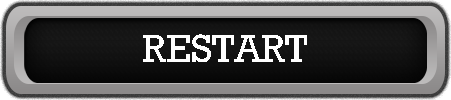
<style>
.page{position:relative;width:451px;height:100px}
.page>*{position:absolute;margin:0}
.t1{font:39.8px "Rockwell";color:#ffffff}
</style>
<div class="page">
<p class="t1" style="left:143px;top:34px;width:164px;height:28px">RESTART</p>
</div>
